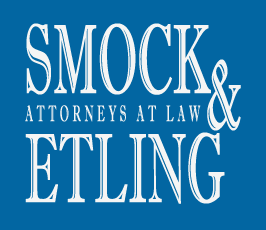
<style>
.page{position:relative;width:266px;height:230px;background:#0266a2}
.page>*{position:absolute;margin:0}
.t1{font:98.4px "ImprintMT-Shadow";letter-spacing:-0.02em;color:#f5f5f4;font-weight:bold;scale:0.49 1}
.t2{font:22.5px "ImprintMT-Shadow";letter-spacing:0.3em;color:#f5f5f4;font-weight:bold;scale:0.49 1}
</style>
<div class="page">
<p class="t1" style="left:26px;top:23px;width:185px;height:72px">SMOCK</p>
<p class="t1" style="left:207px;top:59px;width:34px;height:72px">&amp;</p>
<p class="t2" style="left:25px;top:105px;width:176px;height:17px">ATTORNEYS AT LAW</p>
<p class="t1" style="left:25px;top:132px;width:200px;height:72px">ETLING</p>
</div>
